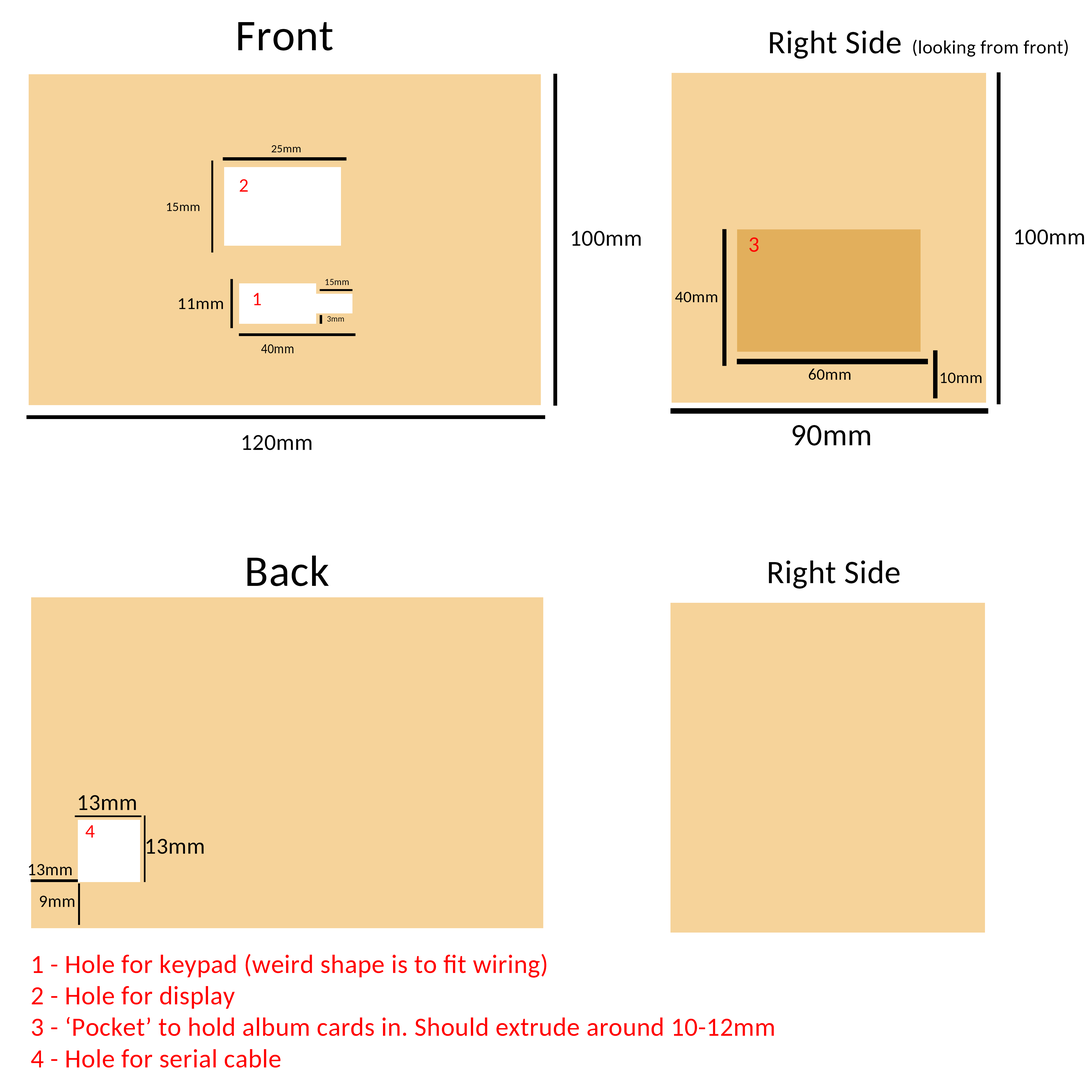
<style>
.page{position:relative;width:1092px;height:1092px;background:#ffffff}
.page>*{position:absolute;margin:0}
.t1{font:44px "Carlito";letter-spacing:0.01em;color:#000000}
.t2{font:32.5px "Carlito";letter-spacing:0.01em;color:#000000}
.t3{font:19.1px "Carlito";letter-spacing:0.01em;color:#000000}
.t4{font:11.5px "Carlito";letter-spacing:0.01em;color:#000000}
.t5{font:19.1px "Carlito";letter-spacing:0.01em;color:#ff0000}
.t6{font:13.1px "Carlito";letter-spacing:0.01em;color:#000000}
.t7{font:22.9px "Carlito";letter-spacing:0.01em;color:#000000}
.t8{font:21.8px "Carlito";letter-spacing:0.01em;color:#ff0000}
.t9{font:9.3px "Carlito";letter-spacing:0.01em;color:#000000}
.t10{font:16.4px "Carlito";letter-spacing:0.01em;color:#000000}
.t11{font:16.7px "Carlito";letter-spacing:0.01em;color:#000000;scale:1.06 1}
.t12{font:8.2px "Carlito";letter-spacing:0.01em;color:#000000}
.t13{font:14.3px "Carlito";letter-spacing:0.01em;color:#000000;scale:0.88 1}
.t14{font:30.8px "Carlito";letter-spacing:0.01em;color:#000000}
.t15{font:17.2px "Carlito";letter-spacing:0.01em;color:#000000}
.t16{font:26.2px "Carlito";letter-spacing:0.01em;color:#ff0000}
</style>
<div class="page">
<p class="t1" style="left:238px;top:22px;width:95px;height:29px">Front</p>
<p class="t2" style="left:770px;top:31px;width:131px;height:28px">Right Side</p>
<p class="t3" style="left:913px;top:39px;width:155px;height:18px">(looking from front)</p>
<p class="t4" style="left:271px;top:145px;width:30px;height:7px">25mm</p>
<p class="t5" style="left:240px;top:179px;width:8px;height:13px">2</p>
<p class="t6" style="left:167px;top:203px;width:33px;height:8px">15mm</p>
<p class="t7" style="left:572px;top:231px;width:69px;height:15px">100mm</p>
<p class="t7" style="left:1015px;top:229px;width:69px;height:16px">100mm</p>
<p class="t8" style="left:749px;top:237px;width:10px;height:15px">3</p>
<p class="t9" style="left:325px;top:279px;width:24px;height:6px">15mm</p>
<p class="t5" style="left:254px;top:293px;width:7px;height:12px">1</p>
<p class="t10" style="left:675px;top:292px;width:42px;height:10px">40mm</p>
<p class="t11" style="left:179px;top:298px;width:44px;height:11px">11mm</p>
<p class="t12" style="left:327px;top:316px;width:17px;height:6px">3mm</p>
<p class="t13" style="left:261px;top:344px;width:32px;height:9px">40mm</p>
<p class="t10" style="left:809px;top:369px;width:42px;height:11px">60mm</p>
<p class="t10" style="left:940px;top:373px;width:42px;height:10px">10mm</p>
<p class="t14" style="left:793px;top:425px;width:77px;height:21px">90mm</p>
<p class="t7" style="left:242px;top:435px;width:69px;height:15px">120mm</p>
<p class="t1" style="left:247px;top:556px;width:82px;height:30px">Back</p>
<p class="t2" style="left:769px;top:560px;width:131px;height:29px">Right Side</p>
<p class="t7" style="left:79px;top:795px;width:57px;height:15px">13mm</p>
<p class="t5" style="left:85px;top:825px;width:10px;height:13px">4</p>
<p class="t7" style="left:146px;top:839px;width:58px;height:15px">13mm</p>
<p class="t15" style="left:29px;top:864px;width:43px;height:11px">13mm</p>
<p class="t15" style="left:40px;top:896px;width:35px;height:11px">9mm</p>
<p class="t16" style="left:31px;top:954px;width:743px;height:114px">1 - Hole for keypad (weird shape is to fit wiring)<br>2 - Hole for display<br>3 - ‘Pocket’ to hold album cards in. Should extrude around 10-12mm<br>4 - Hole for serial cable</p>
</div>
